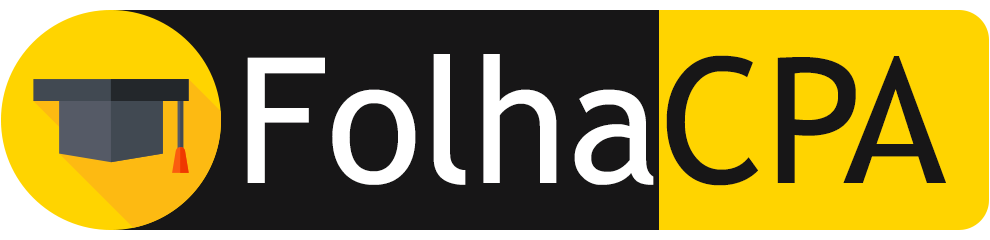
<style>
.page{position:relative;width:990px;height:240px;background:#171617}
.page>*{position:absolute;margin:0}
.t1{font:175px "TrebuchetMS";color:#ffffff}
.t2{font:175px "TrebuchetMS";color:#171617}
</style>
<div class="page">
<p class="t1" style="left:247px;top:54px;width:699px;height:132px">Folha<span class="t2">CPA</span></p>
</div>
